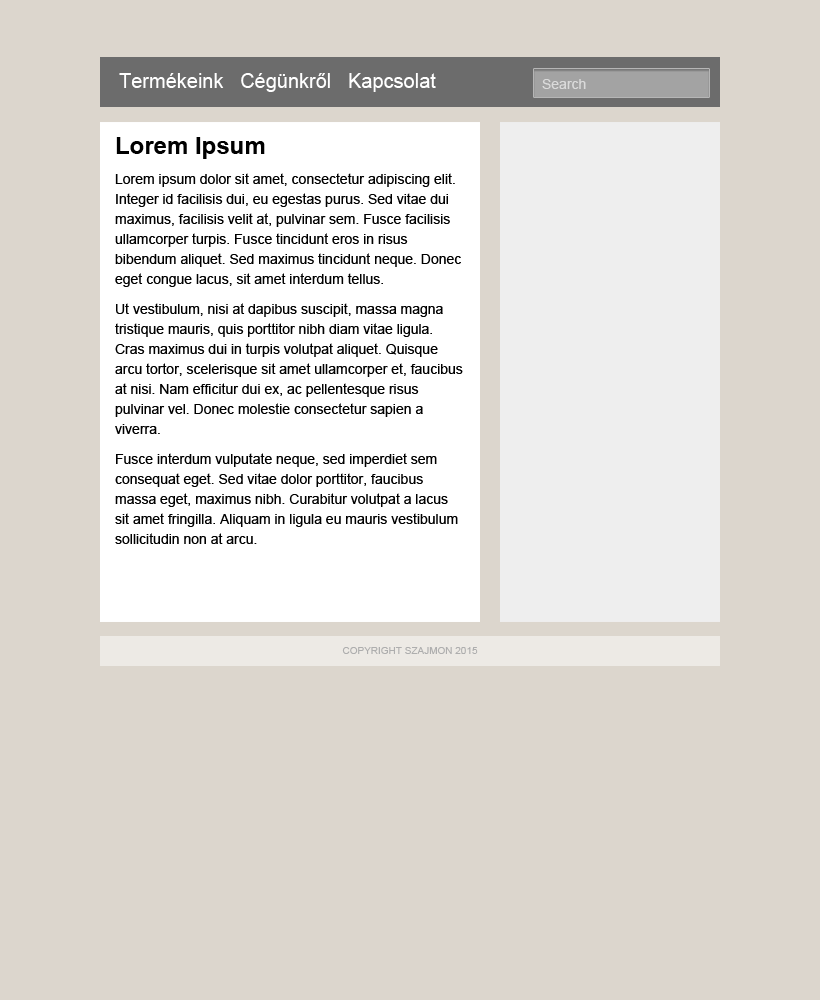
<style>
.page{position:relative;width:820px;height:1000px;background:#dcd6cd}
.page>*{position:absolute;margin:0}
.t1{font:20px "ArialMT";color:#ffffff}
.t2{font:14px "ArialMT";color:#dbdbdb}
.t3{font:14px/20px "ArialMT";color:#000000}
.t4{font:24px/20px "Arial-BoldMT";color:#000000}
.t5{font:10px "ArialMT";color:#adadad;text-transform:uppercase}
</style>
<div class="page">
<p class="t1" style="left:119px;top:73px;width:317px;height:19px">Termékeink   Cégünkről   Kapcsolat</p>
<p class="t2" style="left:542px;top:79px;width:44px;height:10px">Search</p>
<p class="t3" style="left:115px;top:137px;width:348px;height:407px"><span class="t4">Lorem Ipsum<br></span>Lorem ipsum dolor sit amet, consectetur adipiscing elit. Integer id facilisis dui, eu egestas purus. Sed vitae dui maximus, facilisis velit at, pulvinar sem. Fusce facilisis ullamcorper turpis. Fusce tincidunt eros in risus bibendum aliquet. Sed maximus tincidunt neque. Donec eget congue lacus, sit amet interdum tellus.<br>Ut vestibulum, nisi at dapibus suscipit, massa magna tristique mauris, quis porttitor nibh diam vitae ligula. Cras maximus dui in turpis volutpat aliquet. Quisque arcu tortor, scelerisque sit amet ullamcorper et, faucibus at nisi. Nam efficitur dui ex, ac pellentesque risus pulvinar vel. Donec molestie consectetur sapien a viverra.<br>Fusce interdum vulputate neque, sed imperdiet sem consequat eget. Sed vitae dolor porttitor, faucibus massa eget, maximus nibh. Curabitur volutpat a lacus sit amet fringilla. Aliquam in ligula eu mauris vestibulum sollicitudin non at arcu.</p>
<p class="t5" style="left:342px;top:647px;width:136px;height:7px">Copyright szajmon 2015</p>
</div>
